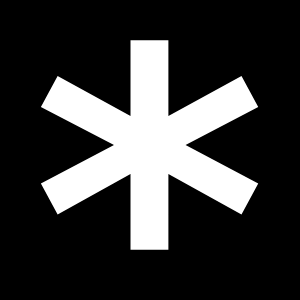
<style>
.page{position:relative;width:300px;height:300px;background:#000000}
.page>*{position:absolute;margin:0}
.t1{font:451px "DejaVuSansMono-Bold";color:#ffffff}
</style>
<div class="page">
<p class="t1" style="left:40px;top:40px;width:219px;height:210px">*</p>
</div>
